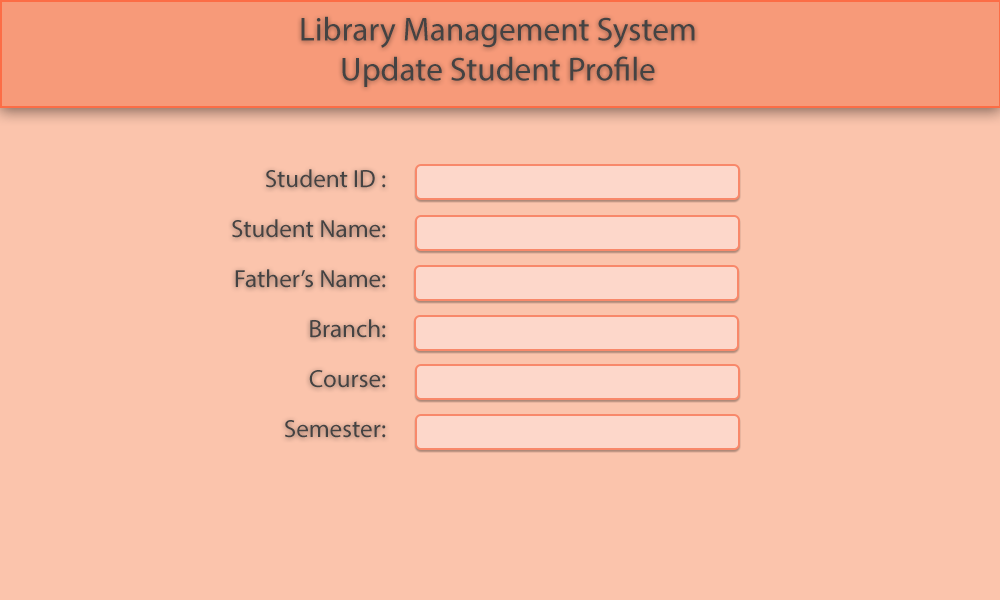
<style>
.page{position:relative;width:1000px;height:600px;background:#fbc4ac}
.page>*{position:absolute;margin:0}
.t1{font:33.3px "MyriadPro-Regular";color:#444343}
.t2{font:25px/50px "MyriadPro-Regular";color:#444343}
</style>
<div class="page">
<p class="t1" style="left:301px;top:16px;width:394px;height:71px;text-align:center">Library Management System<br>Update Student Profile</p>
<p class="t2" style="left:232px;top:169px;width:154px;height:269px;text-align:right">Student ID : <br>Student Name:<br>Father’s Name:<br>Branch:<br>Course:<br>Semester:</p>
</div>
